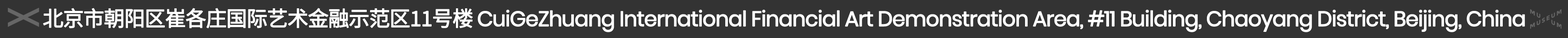
<style>
.page{position:relative;width:1568px;height:38px;background:#333333}
.page>*{position:absolute;margin:0}
.t1{font:20.9px "Poppins-Regular";letter-spacing:-0.05em;color:#ffffff;font-weight:bold}
.t2{font:20.9px "SourceHanSansCN-Regular";letter-spacing:-0.05em;color:#ffffff;font-weight:bold}
</style>
<div class="page">
<p class="t1" style="left:43px;top:8px;width:1482px;height:24px"><span class="t2">北京市朝阳区崔各庄国际艺术金融示范区11号楼 </span>CuiGeZhuang International Financial Art Demonstration Area, #11 Building, Chaoyang District, Beijing, China</p>
</div>
